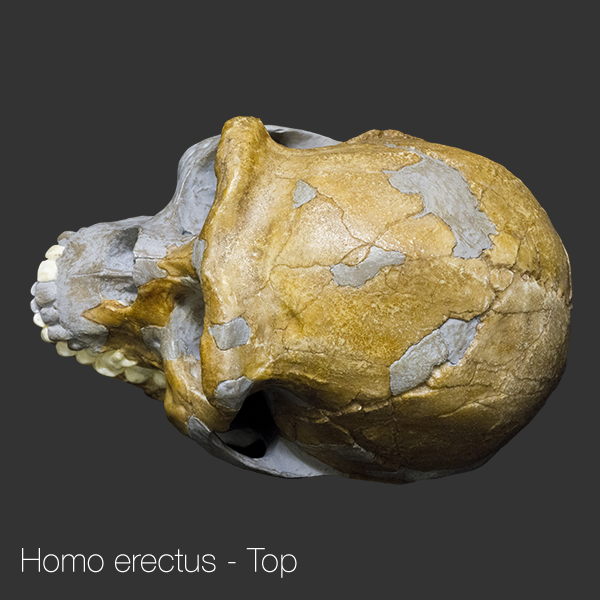
<style>
.page{position:relative;width:600px;height:600px;background:#333333}
.page>*{position:absolute;margin:0}
.t1{font:33.3px "HelveticaNeue-Thin";color:#ffffff}
</style>
<div class="page">
<p class="t1" style="left:22px;top:548px;width:275px;height:30px">Homo erectus - Top</p>
</div>
